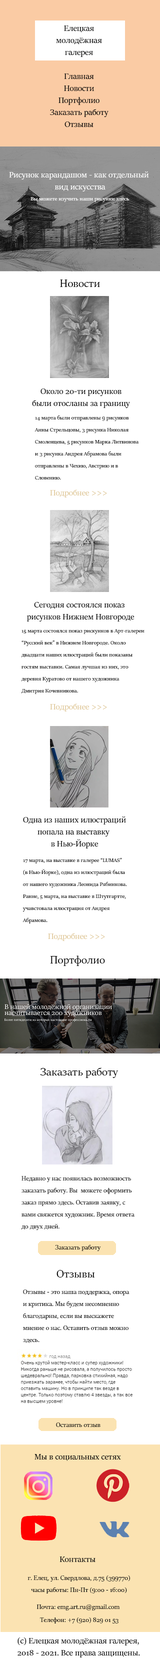
<style>
.page{position:relative;width:160px;height:1664px;background:#ffffff}
.page>*{position:absolute;margin:0}
.t1{font:9px/12px "SitkaBanner";color:#000000}
.t2{font:9px/12px "SitkaBanner";color:#ffffff}
.t3{font:6px "SitkaBanner";color:#ffffff}
.t4{font:12px "SitkaBanner";color:#000000}
.t5{font:6px/12px "SitkaBanner";color:#000000}
.t6{font:9px "SitkaBanner";color:#e0c99b}
.t7{font:7px/12px "SitkaBanner";color:#000000}
.t8{font:7px "SitkaBanner";color:#000000}
.t9{font:9px "SitkaBanner";color:#000000}
</style>
<div class="page">
<p class="t1" style="left:56px;top:26px;width:46px;height:31px;text-align:center">Елецкая<br>молодёжная<br>галерея</p>
<p class="t1" style="left:50px;top:74px;width:58px;height:53px;text-align:center">Главная<br>Новости<br>Портфолио<br>Заказать работу<br>Отзывы</p>
<p class="t2" style="left:9px;top:172px;width:140px;height:20px;text-align:center">Рисунок карандашом - как отдельный <br>вид искусства</p>
<p class="t3" style="left:30px;top:197px;width:99px;height:5px">Вы можете изучить наши рисунки здесь</p>
<p class="t4" style="left:60px;top:280px;width:40px;height:7px">Новости</p>
<p class="t1" style="left:32px;top:388px;width:98px;height:20px;text-align:center">Около 20-ти рисунков<br>были отосланы за границу</p>
<p class="t5" style="left:34px;top:416px;width:105px;height:64px;text-align:right">14 марта были отправлены 9 рисунков<br>Анны Стрельцовы, 3 рисунка Николая<br>Смоленцева, 5 рисунков Марка Литвинова<br>и 3 рисунка Андрея Абрамова были<br>отправлены в Чехию, Австрию и в <br>Словению.</p>
<p class="t6" style="left:50px;top:490px;width:57px;height:8px">Подробнее &gt;&gt;&gt;</p>
<p class="t1" style="left:26px;top:602px;width:108px;height:20px;text-align:center">Сегодня состоялся показ <br>рисунков Нижнем Новгороде</p>
<p class="t5" style="left:22px;top:629px;width:122px;height:65px;text-align:right">15 марта состоялся показ рискунков в Арт-галереи<br>“Русский век” в Нижнем Новгороде. Около <br>двадцати наших илюстраций были показаны <br>гостям выставки. Самая лучшая из них, это <br>деревня Куратово от нашего художника <br>Дмитрия Кочевникова.</p>
<p class="t6" style="left:50px;top:704px;width:57px;height:8px">Подробнее &gt;&gt;&gt;</p>
<p class="t1" style="left:23px;top:816px;width:103px;height:32px;text-align:center">Одна из наших илюстраций<br>попала на выставку <br>в Нью-Йорке</p>
<p class="t5" style="left:22px;top:858px;width:105px;height:66px;text-align:right">17 марта, на выставке в галерее “LUMAS”<br>(в Нью-Йорке), одна из илюстраций была<br>от нашего художника Леонида Рябинкова.<br>Ранне, 5 марта, на выставке в Штутгартте,<br>учавстовала илюстрация от Андрея<br>Абрамова.</p>
<p class="t6" style="left:48px;top:933px;width:57px;height:8px">Подробнее &gt;&gt;&gt;</p>
<p class="t4" style="left:50px;top:956px;width:55px;height:10px">Портфолио</p>
<p class="t4" style="left:40px;top:1068px;width:78px;height:10px">Заказать работу</p>
<p class="t7" style="left:22px;top:1176px;width:112px;height:54px;text-align:right">Недавно у нас появилась возможность <br>заказать работу. Вы  можете оформить <br>заказ прямо здесь. Оставив заявку, с <br>вами свяжется художник. Время ответа <br>до двух дней.</p>
<p class="t8" style="left:55px;top:1245px;width:46px;height:6px">Заказать работу</p>
<p class="t4" style="left:56px;top:1270px;width:39px;height:8px">Отзывы</p>
<p class="t7" style="left:23px;top:1290px;width:107px;height:53px;text-align:right">Отзывы - это наша поддержка, опора<br>и критика. Мы будем несомненно<br>благодарны, если вы выскажете<br>мнение о нас. Оставить отзыв можно<br>здесь.</p>
<p class="t8" style="left:56px;top:1422px;width:44px;height:5px">Оставить отзыв</p>
<p class="t9" style="left:34px;top:1454px;width:87px;height:7px">Мы в социальных сетях</p>
<p class="t9" style="left:60px;top:1556px;width:36px;height:6px">Контакты</p>
<p class="t7" style="left:28px;top:1576px;width:102px;height:18px;text-align:center">г. Елец, ул. Свердлова, д.75 (399770)<br>часы работы: Пн-Пт (9:00 - 16:00)</p>
<p class="t8" style="left:36px;top:1604px;width:84px;height:6px">Почта: emg.art.ru@gmail.com</p>
<p class="t8" style="left:40px;top:1618px;width:78px;height:6px">Телефон: +7 (920) 829 01 53</p>
<p class="t1" style="left:18px;top:1638px;width:122px;height:20px;text-align:right">(с) Елецкая молодёжная галерея, <br>2018 - 2021. Все права защищены.</p>
</div>
